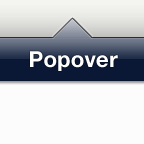
<style>
.page{position:relative;width:144px;height:144px;background:#fcfcfc}
.page>*{position:absolute;margin:0}
.t1{font:22px "HelveticaNeue-Bold";letter-spacing:0.01em;color:#ffffff}
</style>
<div class="page">
<p class="t1" style="left:30px;top:51px;width:88px;height:20px">Popover</p>
</div>
